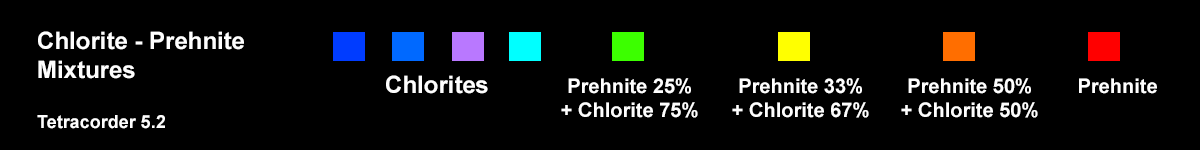
<style>
.page{position:relative;width:1200px;height:150px;background:#000000}
.page>*{position:absolute;margin:0}
.t1{font:24px "Arial-BoldMT";color:#fefefe}
.t2{font:18px "Arial-BoldMT";color:#fefefe}
.t3{font:20px "Arial-BoldMT";color:#fefefe}
</style>
<div class="page">
<p class="t1" style="left:37px;top:31px;width:207px;height:98px">Chlorite - Prehnite<br>Mixtures<br><br><span class="t2">Tetracorder 5.2</span></p>
<p class="t1" style="left:386px;top:75px;width:102px;height:19px">Chlorites</p>
<p class="t3" style="left:561px;top:78px;width:137px;height:40px;text-align:center">Prehnite 25%<br>+ Chlorite 75%</p>
<p class="t3" style="left:732px;top:78px;width:137px;height:40px;text-align:center">Prehnite 33%<br>+ Chlorite 67%</p>
<p class="t3" style="left:901px;top:78px;width:137px;height:40px;text-align:center">Prehnite 50%<br>+ Chlorite 50%</p>
<p class="t3" style="left:1079px;top:78px;width:78px;height:16px">Prehnite</p>
</div>
